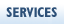
<style>
.page{position:relative;width:64px;height:24px}
.page>*{position:absolute;margin:0}
.t1{font:14px "Humanist521BT-BoldCondensed";color:#2d5078}
</style>
<div class="page">
<p class="t1" style="left:6px;top:7px;width:51px;height:11px">SERVICES</p>
</div>
